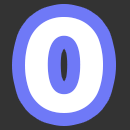
<style>
.page{position:relative;width:130px;height:130px;background:#333333}
.page>*{position:absolute;margin:0}
.t1{font:110.5px "HiraKakuStdN-W8";color:#ffffff}
</style>
<div class="page">
<p class="t1" style="left:25px;top:17px;width:78px;height:96px">０</p>
</div>
